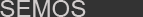
<style>
.page{position:relative;width:143px;height:17px;background:#333333}
.page>*{position:absolute;margin:0}
.t1{font:24px "ArialMT";color:#d1cccc}
</style>
<div class="page">
<p class="t1" style="left:0px;top:0px;width:86px;height:17px">SEMOS</p>
</div>
